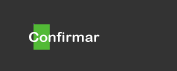
<style>
.page{position:relative;width:177px;height:71px;background:#333333}
.page>*{position:absolute;margin:0}
.t1{font:13.7px "ArialRoundedMTBold";color:#ffffff;scale:1.06 1}
</style>
<div class="page">
<p class="t1" style="left:29px;top:32px;width:71px;height:10px">Confirmar</p>
</div>
